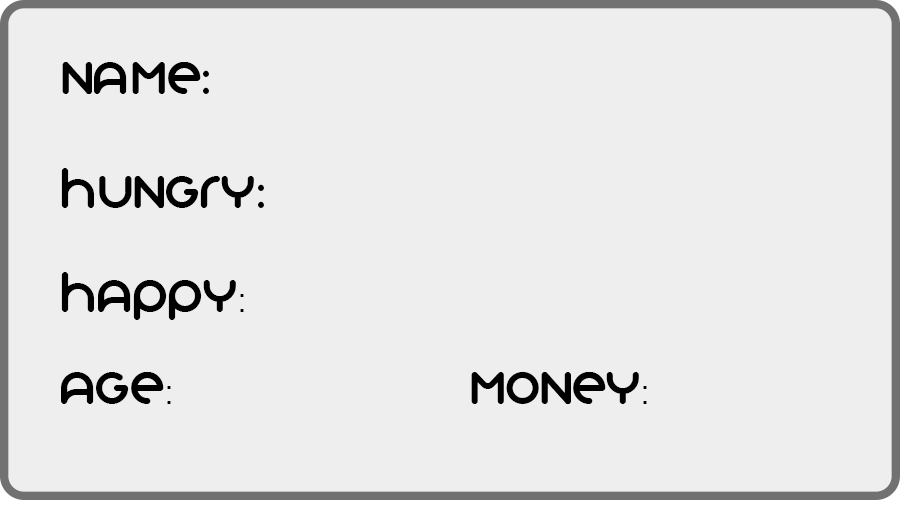
<style>
.page{position:relative;width:903px;height:510px;background:#eeeeee}
.page>*{position:absolute;margin:0}
.t1{font:50px "Organocoloredversionat:logomagazin.comorgano-font";letter-spacing:-0.02em;color:#000000}
.t2{font:50px "MyriadPro-Regular";letter-spacing:-0.02em;color:#000000}
.t3{font:50px "CorbelLight";letter-spacing:-0.02em;color:#000000}
</style>
<div class="page">
<p class="t1" style="left:62px;top:62px;width:147px;height:32px">Name<span class="t2">:</span>:</p>
<p class="t1" style="left:61px;top:168px;width:203px;height:40px">HUNGRY<span class="t2">:</span></p>
<p class="t1" style="left:61px;top:272px;width:183px;height:48px">Happy<span class="t3">:</span></p>
<p class="t1" style="left:61px;top:372px;width:110px;height:32px">Age<span class="t3">:</span></p>
<p class="t1" style="left:471px;top:371px;width:176px;height:33px">MONEY<span class="t3">:</span></p>
</div>
